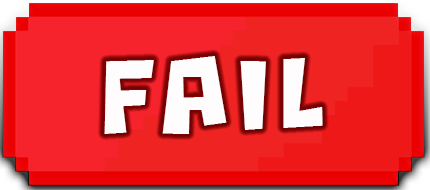
<style>
.page{position:relative;width:430px;height:190px;background:#f6232c}
.page>*{position:absolute;margin:0}
.t1{font:102.6px "NightclubBTN";letter-spacing:0.12em;color:#fefcfc;scale:0.91 1}
</style>
<div class="page">
<p class="t1" style="left:104px;top:56px;width:219px;height:78px">FAIL</p>
</div>
